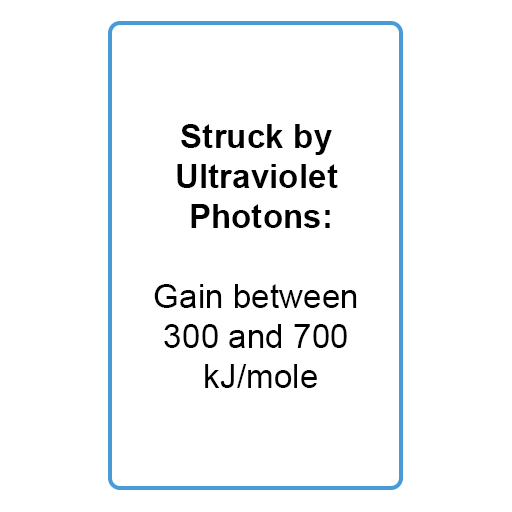
<style>
.page{position:relative;width:512px;height:512px;background:#ffffff}
.page>*{position:absolute;margin:0}
.t1{font:33.3px "ArialMT";color:#000000}
.t2{font:33.3px "Arial-BoldMT";color:#000000}
</style>
<div class="page">
<p class="t1" style="left:154px;top:124px;width:203px;height:264px;text-align:center"><span class="t2">Struck by <br>Ultraviolet <br>Photons:<br><br></span>Gain between <br>300 and 700 <br>kJ/mole</p>
</div>
